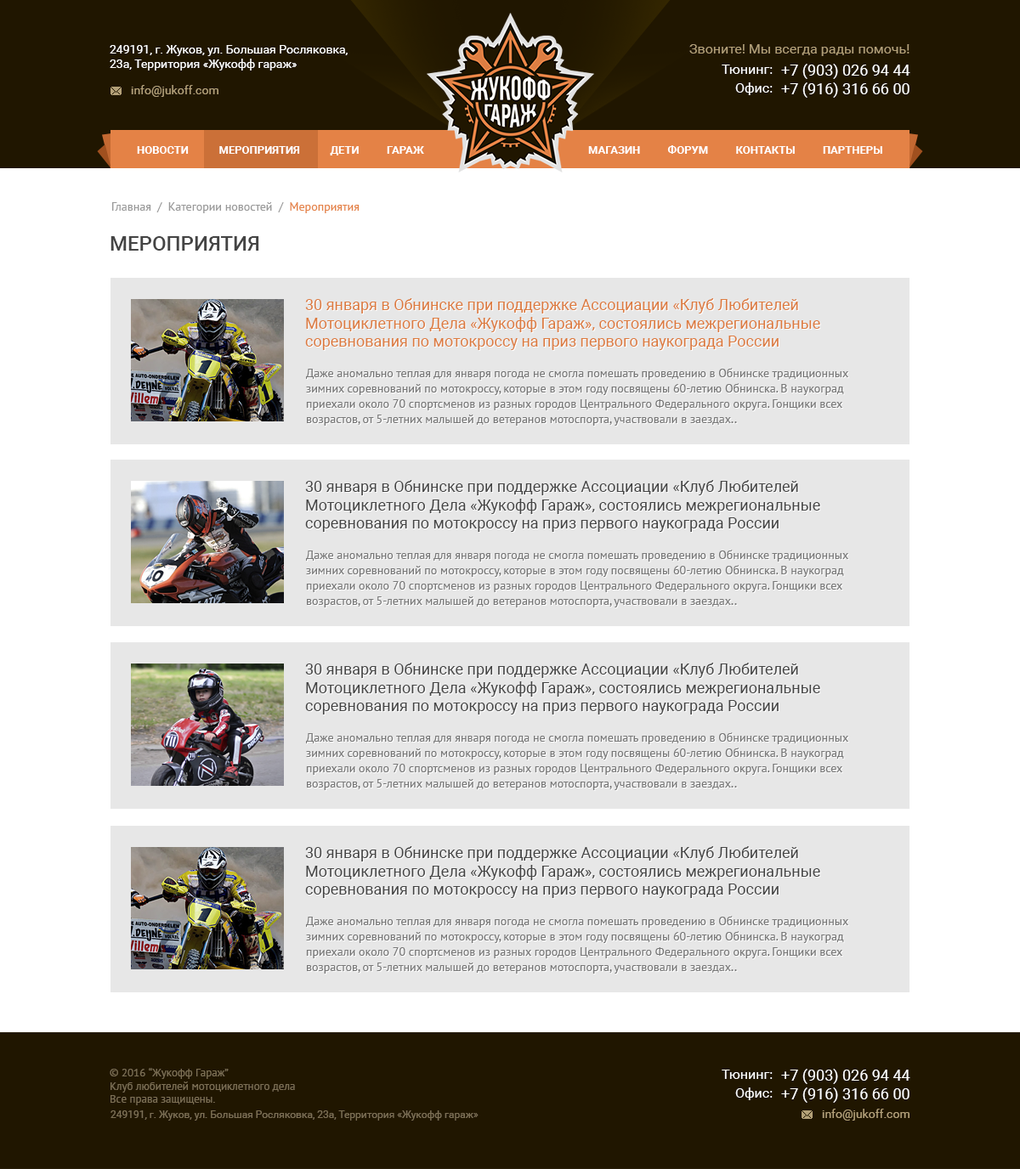
<style>
.page{position:relative;width:1020px;height:1169px;background:#ffffff}
.page>*{position:absolute;margin:0}
.t1{font:11.9px "Roboto-Regular";color:#ffffff}
.t2{font:13.6px "Roboto-Regular";color:#b3a078}
.t3{font:13.6px "Roboto-Regular";color:#ffffff}
.t4{font:15.3px "Roboto-Regular";color:#ffffff;text-transform:uppercase}
.t5{font:11.9px "Roboto-Regular";color:#b3a078}
.t6{font:11px "Roboto-Bold";color:#ffffff;text-transform:uppercase}
.t7{font:11.9px "PTSans-Regular";color:#999999}
.t8{font:11.9px "PTSans-Regular";color:#e48246}
.t9{font:20.4px "Roboto-Medium";color:#444444;text-transform:uppercase}
.t10{font:15.3px "Roboto-Regular";color:#dc7b3f}
.t11{font:11.9px/15.3px "PTSans-Regular";color:#777777}
.t12{font:15.3px "Roboto-Regular";color:#444444}
.t13{font:11px "PTSans-Regular";color:#7d7055}
.t14{font:10.2px "Roboto-Regular";color:#7d7055}
</style>
<div class="page">
<p class="t1" style="left:110px;top:45px;width:238px;height:26px">249191, г. Жуков, ул. Большая Росляковка,<br>23а, Территория «Жукофф гараж»</p>
<p class="t2" style="left:689px;top:44px;width:220px;height:12px">Звоните! Мы всегда рады помочь!</p>
<p class="t3" style="left:721px;top:65px;width:51px;height:9px">Тюнинг:</p>
<p class="t4" style="left:781px;top:64px;width:129px;height:34px">+7 (903) 026 94 44<br>+7 (916) 316 66 00</p>
<p class="t5" style="left:131px;top:85px;width:87px;height:12px">info@jukoff.com</p>
<p class="t3" style="left:735px;top:82px;width:37px;height:13px">Офис:</p>
<p class="t6" style="left:137px;top:146px;width:287px;height:10px">Новости           Мероприятия           дети          Гараж</p>
<p class="t6" style="left:588px;top:145px;width:294px;height:9px">Магазин          Форум          Контакты          Партнеры</p>
<p class="t7" style="left:112px;top:202px;width:247px;height:11px">Главная  /  Категории новостей  / <span class="t8"> Мероприятия</span></p>
<p class="t9" style="left:110px;top:236px;width:149px;height:15px">Мероприятия</p>
<p class="t10" style="left:305px;top:298px;width:515px;height:52px">30 января в Обнинске при поддержке Ассоциации «Клуб Любителей<br>Мотоциклетного Дела «Жукофф Гараж», состоялись межрегиональные<br>соревнования по мотокроссу на приз первого наукограда России</p>
<p class="t11" style="left:306px;top:368px;width:542px;height:58px">Даже аномально теплая для января погода не смогла помешать проведению в Обнинске традиционных зимних соревнований по мотокроссу, которые в этом году посвящены 60-летию Обнинска. В наукоград приехали около 70 спортсменов из разных городов Центрального Федерального округа. Гонщики всех возрастов, от 5-летних малышей до ветеранов мотоспорта, участвовали в заездах..</p>
<p class="t12" style="left:305px;top:480px;width:515px;height:52px">30 января в Обнинске при поддержке Ассоциации «Клуб Любителей<br>Мотоциклетного Дела «Жукофф Гараж», состоялись межрегиональные<br>соревнования по мотокроссу на приз первого наукограда России</p>
<p class="t11" style="left:306px;top:550px;width:542px;height:58px">Даже аномально теплая для января погода не смогла помешать проведению в Обнинске традиционных зимних соревнований по мотокроссу, которые в этом году посвящены 60-летию Обнинска. В наукоград приехали около 70 спортсменов из разных городов Центрального Федерального округа. Гонщики всех возрастов, от 5-летних малышей до ветеранов мотоспорта, участвовали в заездах..</p>
<p class="t12" style="left:305px;top:663px;width:515px;height:52px">30 января в Обнинске при поддержке Ассоциации «Клуб Любителей<br>Мотоциклетного Дела «Жукофф Гараж», состоялись межрегиональные<br>соревнования по мотокроссу на приз первого наукограда России</p>
<p class="t11" style="left:306px;top:733px;width:542px;height:57px">Даже аномально теплая для января погода не смогла помешать проведению в Обнинске традиционных зимних соревнований по мотокроссу, которые в этом году посвящены 60-летию Обнинска. В наукоград приехали около 70 спортсменов из разных городов Центрального Федерального округа. Гонщики всех возрастов, от 5-летних малышей до ветеранов мотоспорта, участвовали в заездах..</p>
<p class="t12" style="left:305px;top:846px;width:515px;height:52px">30 января в Обнинске при поддержке Ассоциации «Клуб Любителей<br>Мотоциклетного Дела «Жукофф Гараж», состоялись межрегиональные<br>соревнования по мотокроссу на приз первого наукограда России</p>
<p class="t11" style="left:306px;top:916px;width:542px;height:58px">Даже аномально теплая для января погода не смогла помешать проведению в Обнинске традиционных зимних соревнований по мотокроссу, которые в этом году посвящены 60-летию Обнинска. В наукоград приехали около 70 спортсменов из разных городов Центрального Федерального округа. Гонщики всех возрастов, от 5-летних малышей до ветеранов мотоспорта, участвовали в заездах..</p>
<p class="t13" style="left:110px;top:1068px;width:185px;height:38px">© 2016 “Жукофф Гараж”<br>Клуб любителей мотоциклетного дела<br>Все права защищены.</p>
<p class="t3" style="left:721px;top:1070px;width:51px;height:9px">Тюнинг:</p>
<p class="t4" style="left:781px;top:1069px;width:129px;height:34px">+7 (903) 026 94 44<br>+7 (916) 316 66 00</p>
<p class="t3" style="left:735px;top:1088px;width:37px;height:12px">Офис:</p>
<p class="t5" style="left:822px;top:1109px;width:87px;height:12px">info@jukoff.com</p>
<p class="t14" style="left:110px;top:1111px;width:368px;height:10px">249191, г. Жуков, ул. Большая Росляковка, 23а, Территория «Жукофф гараж»</p>
</div>
